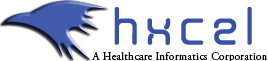
<style>
.page{position:relative;width:268px;height:61px;background:#ffffff}
.page>*{position:absolute;margin:0}
.t1{font:60px "AunchantedXspace";letter-spacing:0.025em;color:#3952a5;font-weight:bold}
.t2{font:11.2px "AGaramondPro-Regular";letter-spacing:0.025em;color:#010101}
</style>
<div class="page">
<p class="t1" style="left:114px;top:7px;width:138px;height:38px">hxcel</p>
<p class="t2" style="left:92px;top:52px;width:175px;height:11px">A Healthcare Informatics Corporation</p>
</div>
